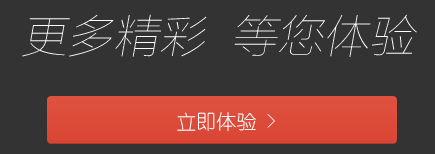
<style>
.page{position:relative;width:435px;height:154px;background:#333333}
.page>*{position:absolute;margin:0}
.t1{font:46px "FZLTCXHJW--GB1-0";color:#ffffff;font-style:italic}
.t2{font:20px "YouYuan";color:#ffffff}
</style>
<div class="page">
<p class="t1" style="left:22px;top:14px;width:395px;height:43px">更多精彩  等您体验</p>
<p class="t2" style="left:177px;top:112px;width:98px;height:19px">立即体验 &gt;</p>
</div>
